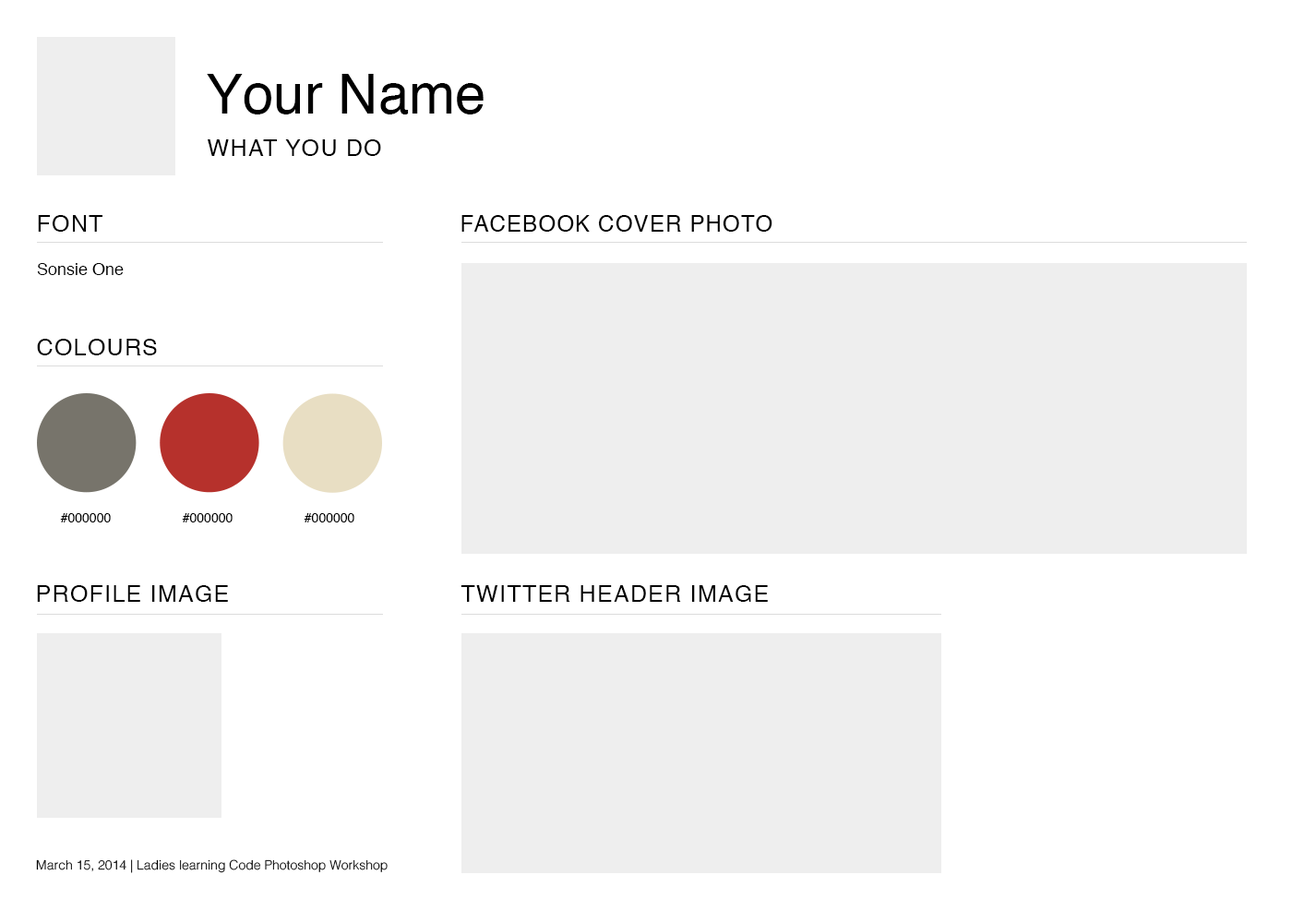
<style>
.page{position:relative;width:1292px;height:923px;background:#ffffff}
.page>*{position:absolute;margin:0}
.t1{font:55.4px "Helvetica";color:#000000}
.t2{font:23.1px "Helvetica";letter-spacing:0.05em;color:#000000;text-transform:uppercase}
.t3{font:22.1px "Helvetica";letter-spacing:0.05em;color:#000000;text-transform:uppercase}
.t4{font:16.6px "Helvetica";color:#000000}
.t5{font:12.9px "Helvetica";color:#000000}
.t6{font:12.9px "Helvetica-Light";color:#000000}
</style>
<div class="page">
<p class="t1" style="left:207px;top:74px;width:277px;height:40px">Your Name</p>
<p class="t2" style="left:208px;top:139px;width:173px;height:17px">What you do</p>
<p class="t2" style="left:38px;top:215px;width:64px;height:17px">Font</p>
<p class="t3" style="left:461px;top:215px;width:311px;height:17px">facebook cover photo</p>
<p class="t4" style="left:37px;top:263px;width:87px;height:12px">Sonsie One</p>
<p class="t2" style="left:37px;top:339px;width:120px;height:16px">Colours</p>
<p class="t5" style="left:60px;top:513px;width:51px;height:9px">#000000</p>
<p class="t5" style="left:182px;top:513px;width:51px;height:9px">#000000</p>
<p class="t5" style="left:304px;top:513px;width:50px;height:9px">#000000</p>
<p class="t2" style="left:37px;top:585px;width:191px;height:17px">profile image</p>
<p class="t2" style="left:461px;top:585px;width:307px;height:17px">Twitter header image</p>
<p class="t6" style="left:36px;top:859px;width:352px;height:14px">March 15, 2014 | Ladies learning Code Photoshop Workshop</p>
</div>
